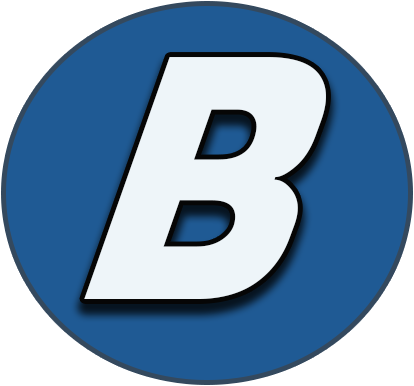
<style>
.page{position:relative;width:414px;height:386px;background:#1f5a94}
.page>*{position:absolute;margin:0}
.t1{font:336.1px "FugazOne-Regular";color:#eef5f9;font-style:italic}
</style>
<div class="page">
<p class="t1" style="left:84px;top:57px;width:242px;height:242px">B</p>
</div>
